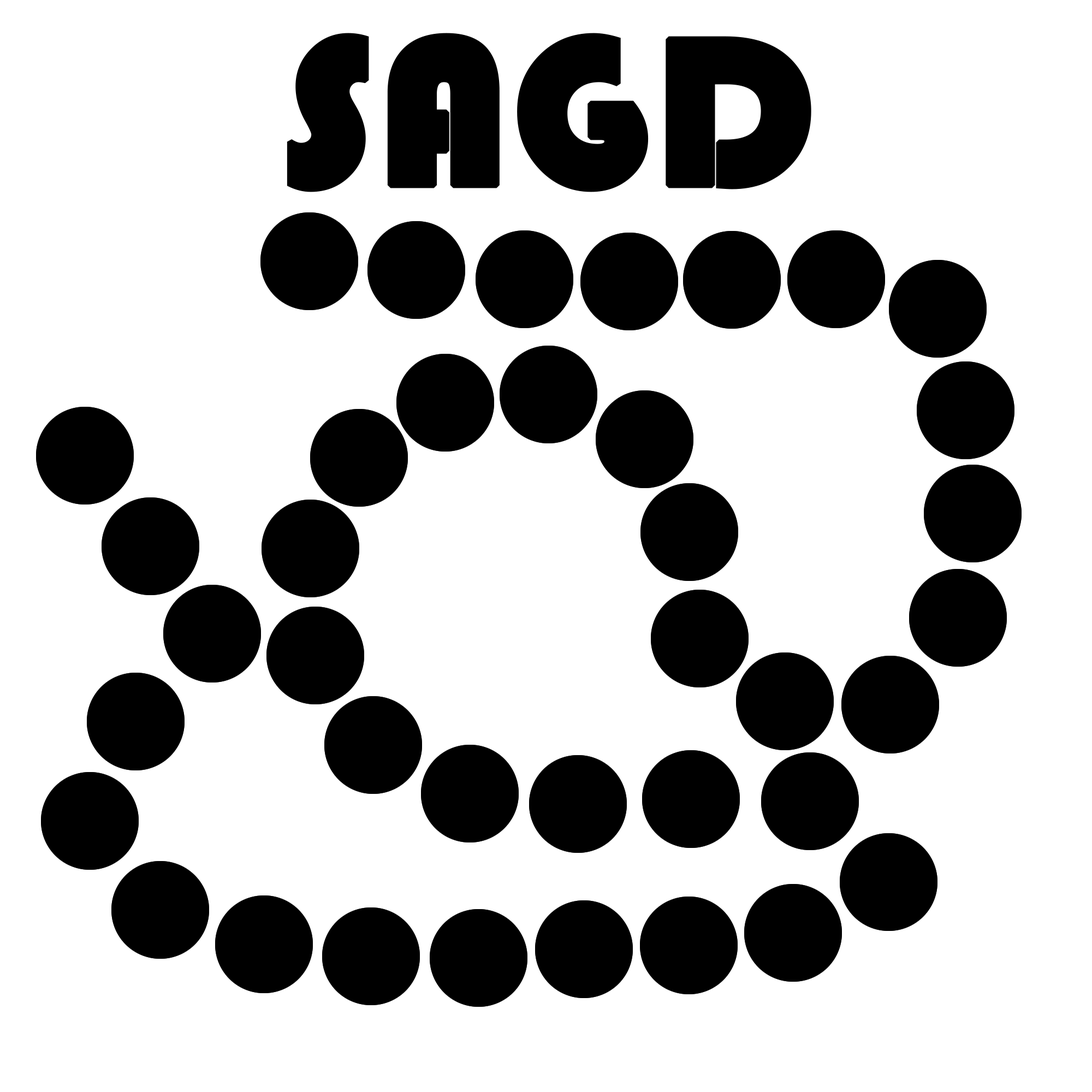
<style>
.page{position:relative;width:1092px;height:1092px;background:#ffffff}
.page>*{position:absolute;margin:0}
.t1{font:218.4px "Bauhaus93";color:#000000;font-weight:bold}
</style>
<div class="page">
<p class="t1" style="left:287px;top:33px;width:524px;height:159px">SAGD</p>
</div>
